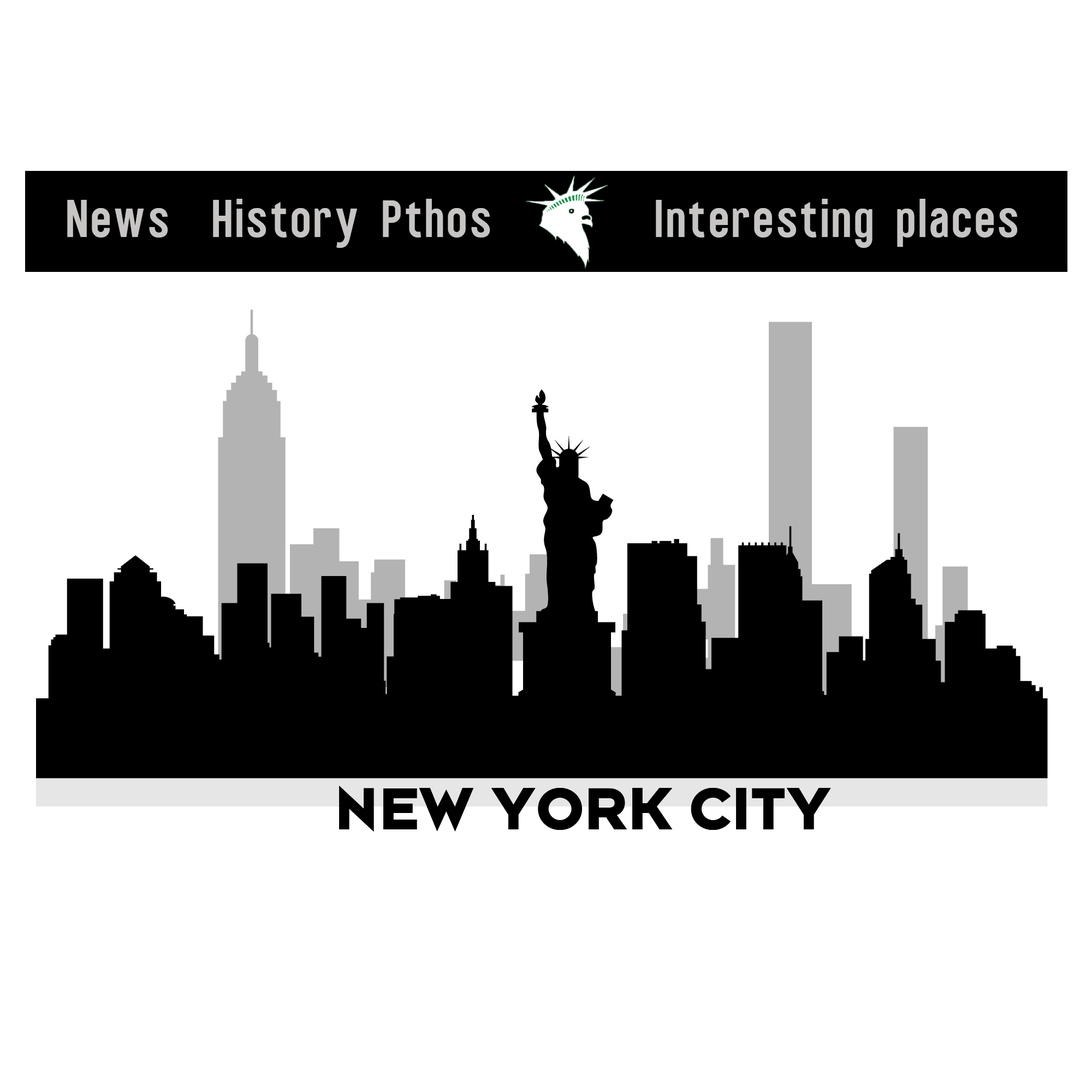
<style>
.page{position:relative;width:1092px;height:1092px;background:#ffffff}
.page>*{position:absolute;margin:0}
.t1{font:62.8px "WearetrippinDisplay";letter-spacing:0.025em;color:#c7c4c4}
.t2{font:65.5px "BonnBoldCaps";letter-spacing:0.025em;color:#000000}
</style>
<div class="page">
<p class="t1" style="left:67px;top:199px;width:951px;height:49px">News  History Pthos      Interesting places</p>
<p class="t2" style="left:339px;top:786px;width:492px;height:46px">NEW YORK CITY</p>
</div>
